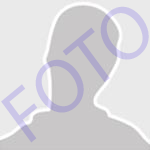
<style>
.page{position:relative;width:150px;height:150px;background:#eaeaea}
.page>*{position:absolute;margin:0}
.t1{font:75.5px "MyriadPro-Regular"}
</style>
<div class="page">
<p class="t1" style="left:1px;top:6px;width:148px;height:137px;rotate:-40deg">FOTO</p>
</div>
